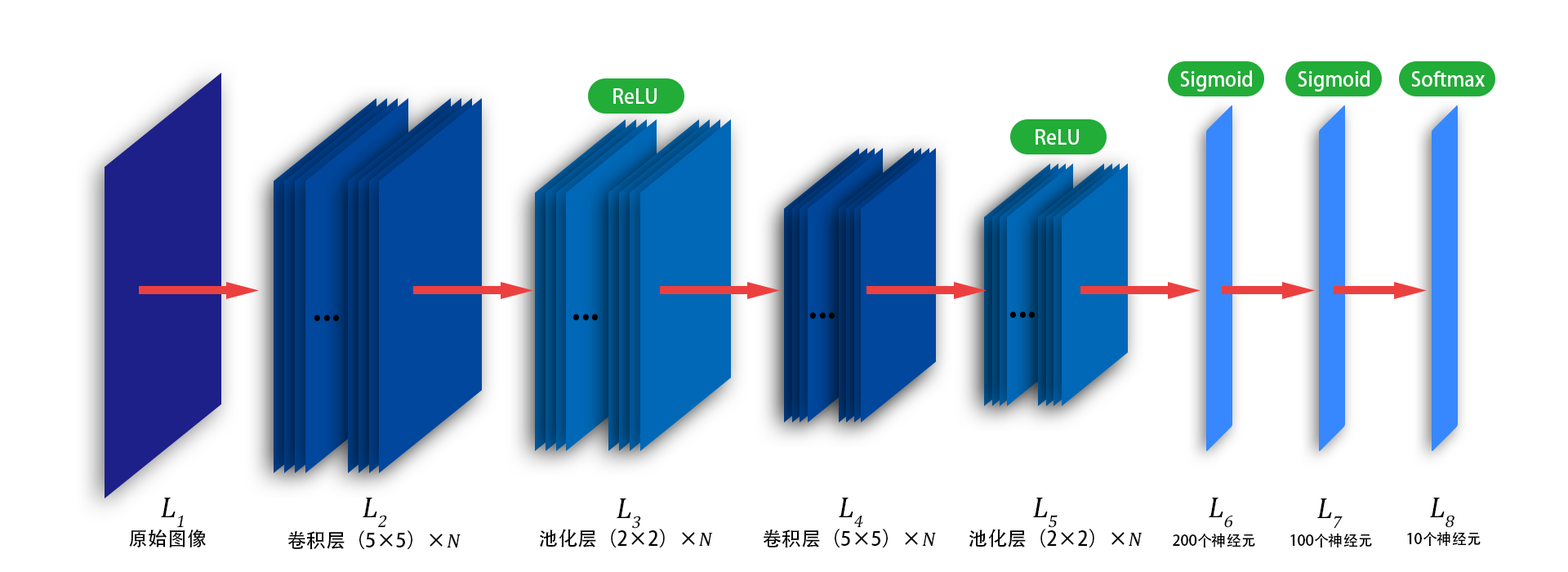
<style>
.page{position:relative;width:1568px;height:572px;background:#ffffff}
.page>*{position:absolute;margin:0}
.t1{font:19.6px "AdobeHeitiStd-Regular";color:#ffffff}
.t2{font:39.2px "AdobeHeitiStd-Regular";color:#000000}
.t3{font:29.4px "CambriaMath";color:#000000;font-style:italic}
.t4{font:19.6px "AdobeHeitiStd-Regular";color:#000000}
.t5{font:19.6px "CambriaMath";color:#000000;font-style:italic}
.t6{font:14.7px "AdobeHeitiStd-Regular";color:#000000}
</style>
<div class="page">
<p class="t1" style="left:1180px;top:70px;width:72px;height:21px">Sigmoid</p>
<p class="t1" style="left:1298px;top:70px;width:72px;height:21px">Sigmoid</p>
<p class="t1" style="left:1411px;top:70px;width:74px;height:17px">Softmax</p>
<p class="t1" style="left:613px;top:88px;width:44px;height:16px">ReLU</p>
<p class="t1" style="left:1036px;top:129px;width:43px;height:16px">ReLU</p>
<p class="t2" style="left:314px;top:314px;width:25px;height:7px">...</p>
<p class="t2" style="left:572px;top:314px;width:26px;height:6px">...</p>
<p class="t2" style="left:809px;top:312px;width:26px;height:6px">...</p>
<p class="t2" style="left:1009px;top:311px;width:26px;height:7px">...</p>
<p class="t3" style="left:161px;top:497px;width:23px;height:31px">L1</p>
<p class="t3" style="left:363px;top:497px;width:24px;height:31px">L2</p>
<p class="t3" style="left:839px;top:497px;width:24px;height:31px">L4</p>
<p class="t3" style="left:1033px;top:497px;width:25px;height:31px">L5</p>
<p class="t3" style="left:1209px;top:497px;width:24px;height:31px">L6</p>
<p class="t3" style="left:1430px;top:497px;width:24px;height:31px">L8</p>
<p class="t3" style="left:617px;top:498px;width:24px;height:30px">L3</p>
<p class="t3" style="left:1317px;top:498px;width:26px;height:30px">L7</p>
<p class="t4" style="left:129px;top:528px;width:77px;height:19px">原始图像</p>
<p class="t4" style="left:287px;top:530px;width:174px;height:19px">卷积层（5×5）×<span class="t5">N</span></p>
<p class="t4" style="left:540px;top:528px;width:173px;height:19px">池化层（2×2）×<span class="t5">N</span></p>
<p class="t4" style="left:763px;top:528px;width:173px;height:19px">卷积层（5×5）×<span class="t5">N</span></p>
<p class="t4" style="left:969px;top:528px;width:174px;height:19px">池化层（2×2）×<span class="t5">N</span></p>
<p class="t6" style="left:1173px;top:532px;width:82px;height:15px">200个神经元</p>
<p class="t6" style="left:1290px;top:532px;width:82px;height:15px">100个神经元</p>
<p class="t6" style="left:1407px;top:531px;width:74px;height:15px">10个神经元</p>
</div>
